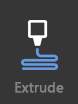
<style>
.page{position:relative;width:78px;height:104px;background:#363636}
.page>*{position:absolute;margin:0}
.t1{font:14px "SegoeUI";color:#848484;font-weight:bold}
</style>
<div class="page">
<p class="t1" style="left:15px;top:82px;width:49px;height:11px">Extrude</p>
</div>
